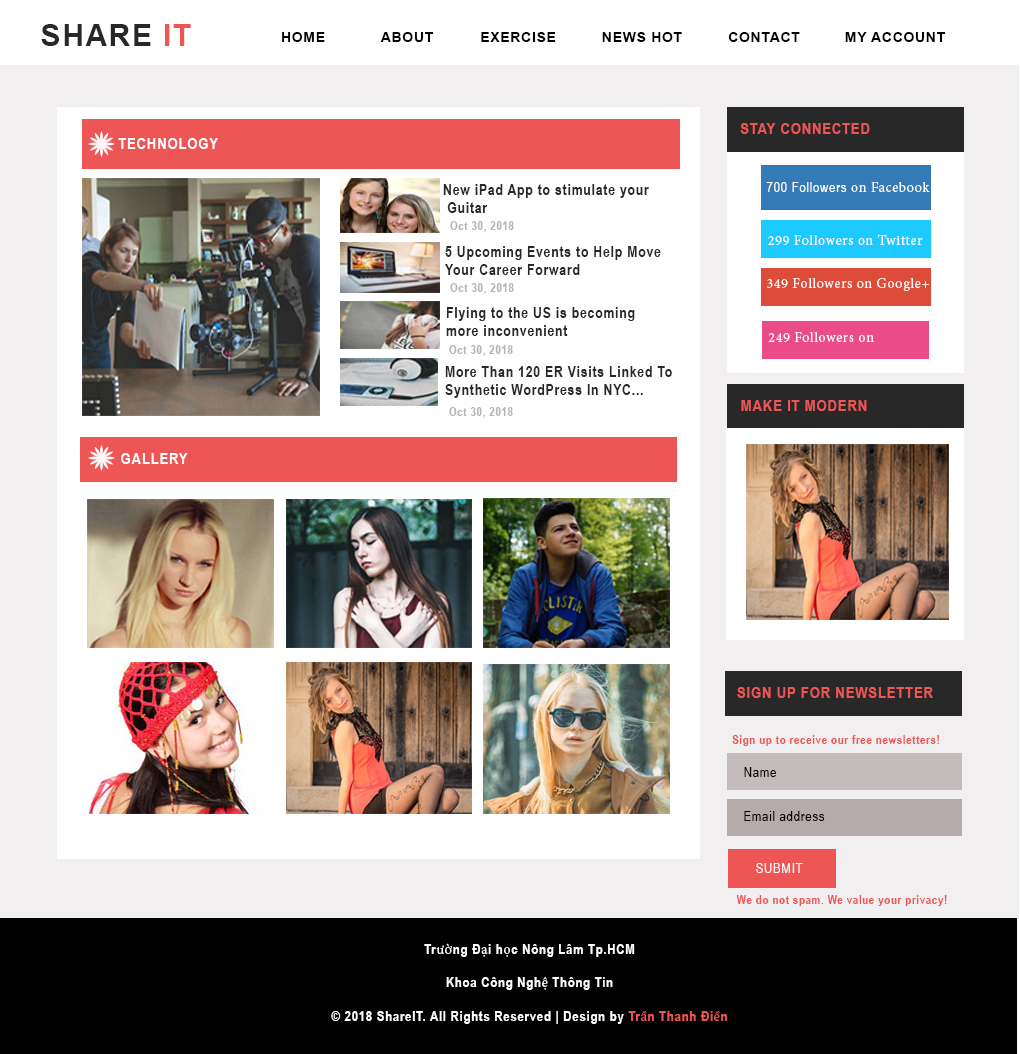
<style>
.page{position:relative;width:1020px;height:1054px;background:#ffffff}
.page>*{position:absolute;margin:0}
.t1{font:30px "Arial-BoldMT";letter-spacing:0.05em;color:#282828}
.t2{font:30px "Arial-BoldMT";letter-spacing:0.05em;color:#ee5656}
.t3{font:14px "Arial-BoldMT";letter-spacing:0.05em;color:#030000}
.t4{font:16px "ArialNarrow-Bold";letter-spacing:0.05em;color:#ee5656}
.t5{font:16px "ArialNarrow-Bold";letter-spacing:0.05em;color:#fffdfd}
.t6{font:15px "ArialNarrow-Bold";letter-spacing:0.05em;color:#282828}
.t7{font:14px "ArialNarrow";letter-spacing:0.05em;color:#fdfcfc}
.t8{font:14px "MinionPro-Regular";letter-spacing:0.05em;color:#fdfcfc}
.t9{font:12px "ArialNarrow-Bold";letter-spacing:0.05em;color:#b5b5b5}
.t10{font:12px "ArialNarrow-Bold";letter-spacing:0.05em;color:#ee5656}
.t11{font:14px "ArialNarrow";letter-spacing:0.05em;color:#030000}
.t12{font:14px "ArialNarrow";letter-spacing:0.05em;color:#faf8f8}
.t13{font:14px "ArialNarrow-Bold";letter-spacing:0.05em;color:#fffbfb}
.t14{font:14px "MinionPro-Regular";letter-spacing:0.05em;color:#fffbfb}
.t15{font:14px "ArialNarrow-Bold";letter-spacing:0.05em;color:#ee5656}
.t16{font:14px "MinionPro-Regular";letter-spacing:0.05em;color:#ee5656}
</style>
<div class="page">
<p class="t1" style="left:41px;top:24px;width:150px;height:22px">SHARE <span class="t2">IT</span></p>
<p class="t3" style="left:282px;top:32px;width:43px;height:10px">HOME</p>
<p class="t3" style="left:380px;top:32px;width:54px;height:10px">ABOUT</p>
<p class="t3" style="left:481px;top:32px;width:75px;height:10px">EXERCISE</p>
<p class="t3" style="left:602px;top:32px;width:80px;height:10px">NEWS HOT</p>
<p class="t3" style="left:728px;top:32px;width:72px;height:10px">CONTACT</p>
<p class="t3" style="left:845px;top:32px;width:101px;height:10px">MY ACCOUNT</p>
<p class="t4" style="left:740px;top:123px;width:130px;height:11px">STAY CONNECTED</p>
<p class="t5" style="left:118px;top:138px;width:100px;height:11px">TECHNOLOGY</p>
<p class="t6" style="left:443px;top:184px;width:206px;height:29px">New iPad App to stimulate your<br> Guitar</p>
<p class="t7" style="left:766px;top:182px;width:164px;height:10px">700 Followers<span class="t8"> on Facebook</span></p>
<p class="t9" style="left:450px;top:221px;width:64px;height:11px">Oct 30, 2018</p>
<p class="t6" style="left:445px;top:246px;width:216px;height:29px">5 Upcoming Events to Help Move <br>Your Career Forward</p>
<p class="t8" style="left:768px;top:234px;width:155px;height:11px">299 Followers on Twitter</p>
<p class="t8" style="left:767px;top:278px;width:162px;height:13px">349 Followers on Google+</p>
<p class="t9" style="left:450px;top:283px;width:64px;height:11px">Oct 30, 2018</p>
<p class="t6" style="left:446px;top:307px;width:189px;height:29px">Flying to the US is becoming <br>more inconvenient</p>
<p class="t8" style="left:768px;top:332px;width:106px;height:10px">249 Followers on</p>
<p class="t9" style="left:449px;top:345px;width:64px;height:11px">Oct 30, 2018</p>
<p class="t6" style="left:445px;top:366px;width:227px;height:32px">More Than 120 ER Visits Linked To <br>Synthetic WordPress In NYC...</p>
<p class="t4" style="left:741px;top:400px;width:126px;height:11px">MAKE IT MODERN</p>
<p class="t9" style="left:449px;top:407px;width:64px;height:11px">Oct 30, 2018</p>
<p class="t5" style="left:121px;top:453px;width:67px;height:11px">GALLERY</p>
<p class="t4" style="left:737px;top:687px;width:196px;height:11px">SIGN UP FOR NEWSLETTER</p>
<p class="t10" style="left:732px;top:735px;width:207px;height:11px">Sign up to receive our free newsletters!</p>
<p class="t11" style="left:744px;top:767px;width:32px;height:10px">Name</p>
<p class="t11" style="left:744px;top:811px;width:81px;height:10px">Email address</p>
<p class="t12" style="left:756px;top:863px;width:47px;height:10px">SUBMIT</p>
<p class="t10" style="left:736px;top:895px;width:211px;height:11px">We do not spam. We value your privacy!</p>
<p class="t13" style="left:331px;top:943px;width:396px;height:81px;text-align:center">Tr<span class="t14">ườ</span>ng Đ<span class="t14">ạ</span>i h<span class="t14">ọ</span>c Nông Lâm Tp.HCM<br><br>Khoa Công Ngh<span class="t14">ệ</span> Thông Tin<br><br>© 2018 ShareIT. All Rights Reserved | Design by <span class="t15">Tr</span><span class="t16">ầ</span><span class="t15">n Thanh Đi</span><span class="t16">ề</span><span class="t15">n</span></p>
</div>
